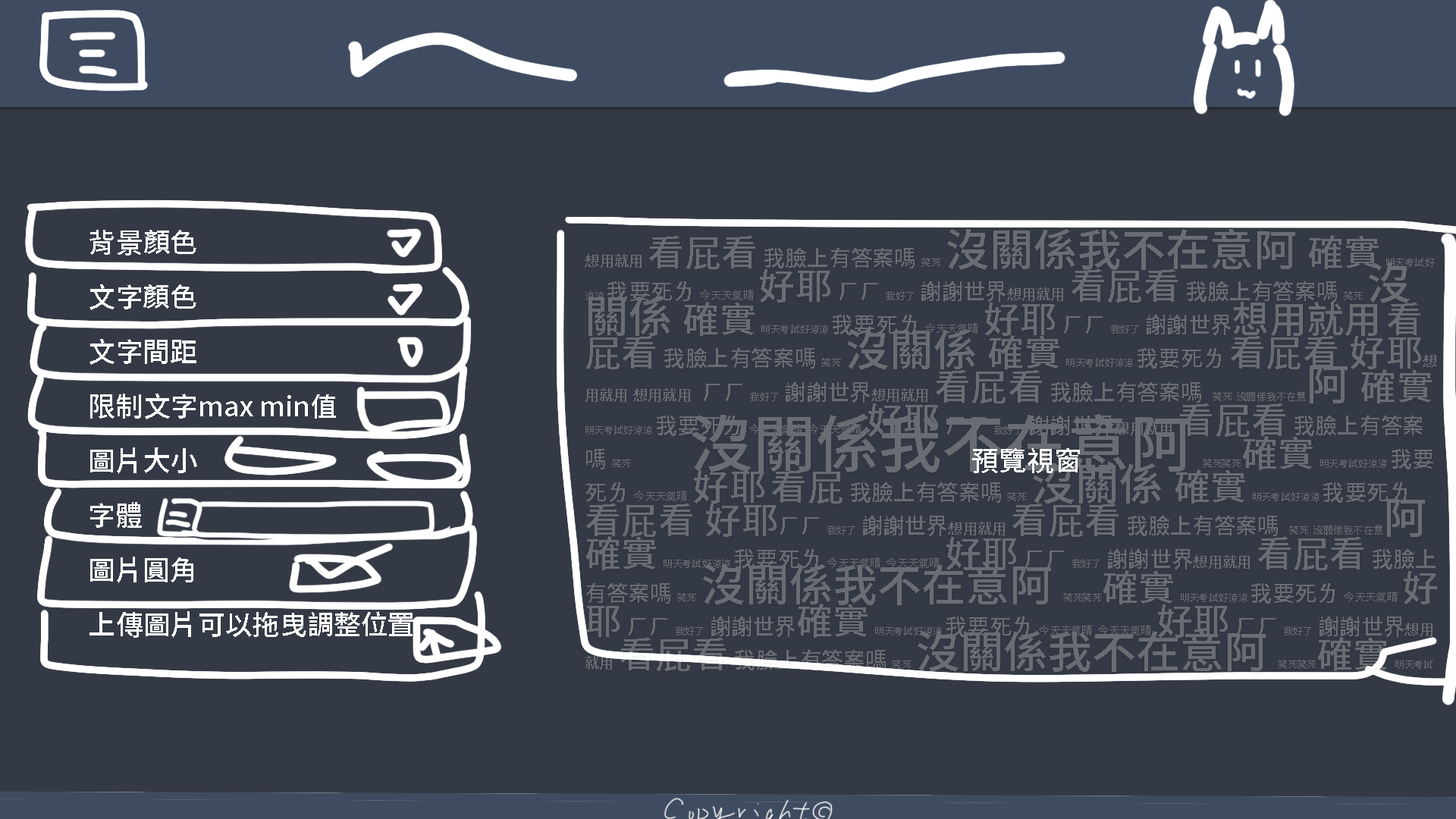
<style>
.page{position:relative;width:1456px;height:819px;background:#343a45}
.page>*{position:absolute;margin:0}
.t1{font:27.3px/54.6px "NotoSansCJKtc-Medium";color:#ffffff}
.t2{font:11px/33.5px "NotoSansCJKtc-Medium";color:#696d73}
.t3{font:14.7px/33.5px "NotoSansCJKtc-Medium";color:#696d73}
.t4{font:36.7px/33.5px "NotoSansCJKtc-Medium";color:#696d73}
.t5{font:22px/33.5px "NotoSansCJKtc-Medium";color:#696d73}
.t6{font:9.8px/33.5px "NotoSansCJKtc-Medium";color:#696d73}
.t7{font:44px/33.5px "NotoSansCJKtc-Medium";color:#696d73}
.t8{font:37.4px/33.5px "NotoSansCJKtc-Medium";color:#696d73}
.t9{font:10px/33.5px "NotoSansCJKtc-Medium";color:#696d73}
.t10{font:62.8px/33.5px "NotoSansCJKtc-Medium";color:#696d73}
</style>
<div class="page">
<p class="t1" style="left:89px;top:230px;width:991px;height:408px">背景顏色<br>文字顏色<br>文字間距<br>限制文字max min值<br>圖片大小                                                                                                                              預覽視窗<br>字體<br>圖片圓角<br>上傳圖片可以拖曳調整位置</p>
<p class="t2" style="left:585px;top:229px;width:852px;height:443px"><span class="t3">想用就用 </span><span class="t4">看屁看</span><span class="t5"> 我臉上有答案嗎 </span><span class="t6">笑死 </span><span class="t7">沒關係我不在意阿 </span><span class="t4">確實 </span><span class="t6">明天考試好涼涼 </span><span class="t5">我要死ㄌ </span>今天天氣晴 <span class="t4">好耶</span><span class="t5"> ㄏㄏ </span><span class="t6">我好了</span><span class="t5"> 謝謝世界</span><span class="t3">想用就用 </span><span class="t4">看屁看</span><span class="t5"> 我臉上有答案嗎 </span><span class="t6">笑死 </span><span class="t7">沒關係 </span><span class="t4">確實 </span><span class="t6">明天考試好涼涼 </span><span class="t5">我要死ㄌ </span>今天天氣晴 <span class="t4">好耶</span><span class="t5"> ㄏㄏ </span><span class="t6">我好了</span><span class="t5"> 謝謝世界</span><span class="t8">想用就用 </span><span class="t4">看屁看</span><span class="t5"> 我臉上有答案嗎 </span><span class="t6">笑死 </span><span class="t7">沒關係 </span><span class="t4">確實 </span><span class="t6">明天考試好涼涼 </span><span class="t5">我要死ㄌ </span><span class="t4">看屁看  好耶</span><span class="t3">想用就用 想用就用</span><span class="t5">  ㄏㄏ </span><span class="t6">我好了</span><span class="t5"> 謝謝世界</span><span class="t3">想用就用 </span><span class="t4">看屁看</span><span class="t5"> 我臉上有答案嗎  </span><span class="t6">笑死 </span><span class="t9">沒關係我不在意</span><span class="t7">阿 </span><span class="t4">確實 </span><span class="t6">明天考試好涼涼 </span><span class="t5">我要死ㄌ </span>今天天氣晴 今天天氣晴 <span class="t4">好耶</span><span class="t5"> ㄏㄏ </span><span class="t6">我好了</span><span class="t5"> 謝謝世界</span><span class="t3">想用就用 </span><span class="t4">看屁看</span><span class="t5"> 我臉上有答案嗎 </span><span class="t6">笑死            </span><span class="t10">沒關係我不在意阿 </span><span class="t6">笑死笑死</span><span class="t4">確實 </span><span class="t6">明天考試好涼涼 </span><span class="t5">我要死ㄌ </span>今天天氣晴 <span class="t4">好耶 看屁</span><span class="t5"> 我臉上有答案嗎 </span><span class="t6">笑死 </span><span class="t7">沒關係 </span><span class="t4">確實 </span><span class="t6">明天考試好涼涼 </span><span class="t5">我要死ㄌ </span><span class="t4">看屁看  好耶</span><span class="t5">ㄏㄏ </span><span class="t6">我好了</span><span class="t5"> 謝謝世界</span><span class="t3">想用就用 </span><span class="t4">看屁看</span><span class="t5"> 我臉上有答案嗎  </span><span class="t6">笑死 </span><span class="t9">沒關係我不在意</span><span class="t7">阿 </span><span class="t4">確實 </span><span class="t6">明天考試好涼涼 </span><span class="t5">我要死ㄌ </span>今天天氣晴 今天天氣晴 <span class="t4">好耶</span><span class="t5"> ㄏㄏ </span><span class="t6">我好了</span><span class="t5"> 謝謝世界</span><span class="t3">想用就用 </span><span class="t4">看屁看</span><span class="t5"> 我臉上有答案嗎 </span><span class="t6">笑死 </span><span class="t7">沒關係我不在意阿 </span><span class="t6">笑死笑死</span><span class="t4">確實 </span><span class="t6">明天考試好涼涼 </span><span class="t5">我要死ㄌ </span>今天天氣晴 <span class="t4">好耶</span><span class="t5"> ㄏㄏ </span><span class="t6">我好了</span><span class="t5"> 謝謝世界</span><span class="t4">確實 </span><span class="t6">明天考試好涼涼 </span><span class="t5">我要死ㄌ </span>今天天氣晴 今天天氣晴 <span class="t4">好耶</span><span class="t5"> ㄏㄏ </span><span class="t6">我好了</span><span class="t5"> 謝謝世界</span><span class="t3">想用就用 </span><span class="t4">看屁看</span><span class="t5"> 我臉上有答案嗎 </span><span class="t6">笑死 </span><span class="t7">沒關係我不在意阿 </span><span class="t6">笑死笑死</span><span class="t4">確實 </span><span class="t6">明天考試好涼涼 </span><span class="t5">我要死ㄌ </span>今天天氣晴 <span class="t4">好耶</span><span class="t5"> ㄏㄏ </span><span class="t6">我好了</span><span class="t5"> 謝謝世界</span></p>
</div>
